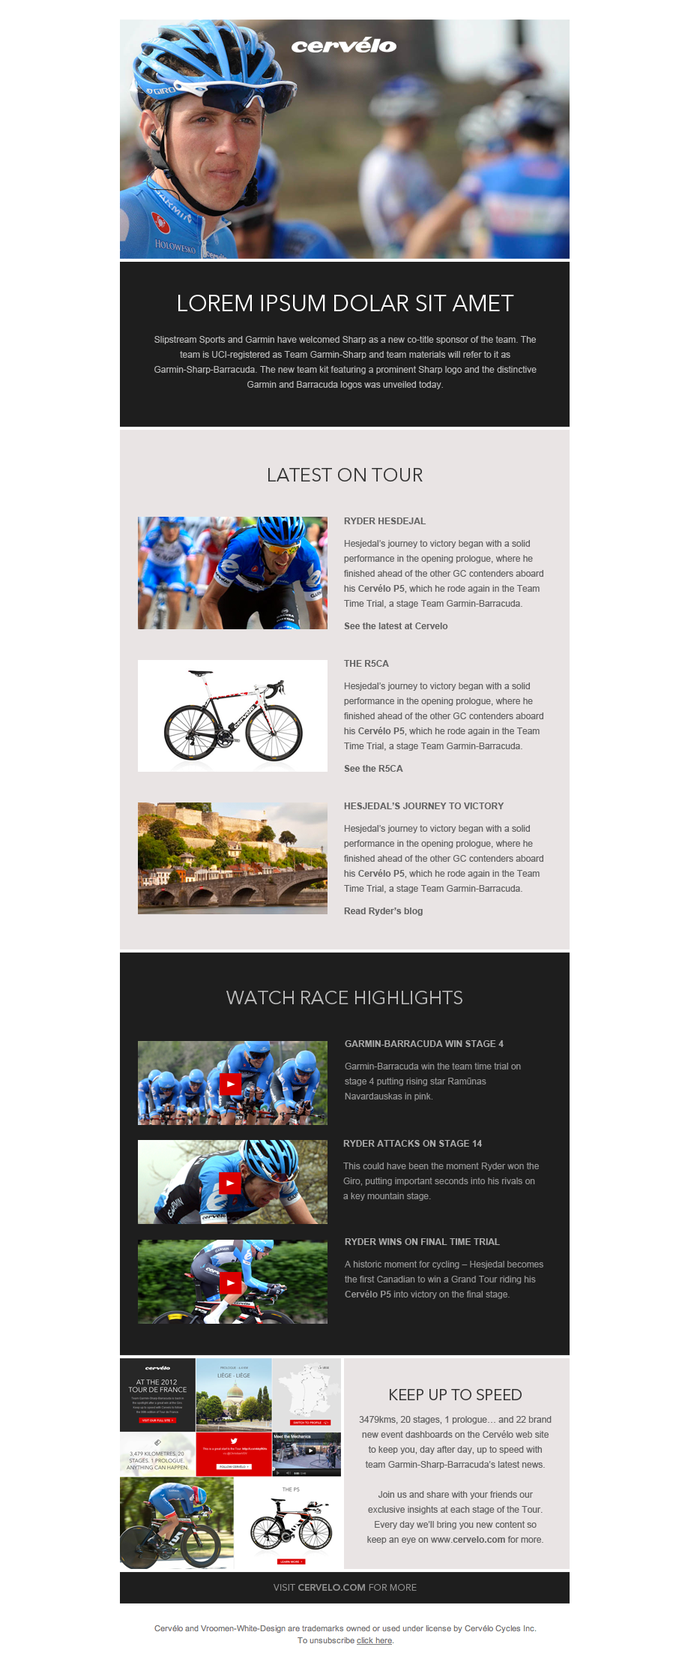
<style>
.page{position:relative;width:688px;height:1668px;background:#ffffff}
.page>*{position:absolute;margin:0}
.t1{font:22.5px "AvenirNextLTPro-Regular";color:#ffffff}
.t2{font:9px/15px "ArialMT";color:#b8b8b8}
.t3{font:18.7px "AvenirNextLTPro-Regular";color:#343434;text-transform:uppercase}
.t4{font:9px/15px "ArialMT";color:#626262}
.t5{font:9px/22.5px "Arial-BoldMT";color:#626262;text-transform:uppercase}
.t6{font:9px/22.5px "ArialMT";color:#626262}
.t7{font:9px/15px "Arial-BoldMT";color:#626262}
.t8{font:9px/22.5px "Arial-BoldMT";color:#626262}
.t9{font:9px/15px "Arial-BoldMT";color:#626262;text-transform:uppercase}
.t10{font:18.7px "AvenirNextLTPro-Regular";color:#bebebe;text-transform:uppercase}
.t11{font:9px/15px "ArialMT";color:#939393}
.t12{font:9px/19.5px "Arial-BoldMT";color:#ababab;text-transform:uppercase}
.t13{font:9px/22.5px "ArialMT";color:#939393}
.t14{font:9px/15px "Arial-BoldMT";color:#939393}
.t15{font:15px/19.5px "AvenirNextLTPro-Regular";color:#343434;text-transform:uppercase}
.t16{font:9px/16.5px "ArialMT";color:#626262}
.t17{font:9px "AvenirNextLTPro-Demi";letter-spacing:0.025em;color:#8d8d8d;text-transform:uppercase}
.t18{font:9px "AvenirNextLTPro-Regular";letter-spacing:0.025em;color:#8d8d8d;text-transform:uppercase}
</style>
<div class="page">
<p class="t1" style="left:178px;top:295px;width:336px;height:16px">LOREM IPSUM DOLAR SIT AMET</p>
<p class="t2" style="left:154px;top:336px;width:383px;height:53px;text-align:center">Slipstream Sports and Garmin have welcomed Sharp as a new co-title sponsor of the team. The team is UCI-registered as Team Garmin-Sharp and team materials will refer to it as Garmin-Sharp-Barracuda. The new team kit featuring a prominent Sharp logo and the distinctive Garmin and Barracuda logos was unveiled today.</p>
<p class="t3" style="left:268px;top:468px;width:155px;height:13px">LATEST ON TOUR</p>
<p class="t4" style="left:344px;top:517px;width:200px;height:112px"><span class="t5">ryder hesdejal<br></span><span class="t6">Hesjedal’s</span> journey to victory began with a solid performance in the opening prologue, where he finished ahead of the other GC contenders aboard his <span class="t7">Cervélo P5</span>, which he rode again in the Team Time Trial, a stage Team Garmin-Barracuda.<br><span class="t8">See</span><span class="t7"> the latest at Cervelo</span></p>
<p class="t4" style="left:344px;top:660px;width:200px;height:112px"><span class="t5">the r5ca<br></span><span class="t6">Hesjedal’s</span> journey to victory began with a solid performance in the opening prologue, where he finished ahead of the other GC contenders aboard his <span class="t7">Cervélo P5</span>, which he rode again in the Team Time Trial, a stage Team Garmin-Barracuda.<br><span class="t8">See</span><span class="t7"> the R5CA</span></p>
<p class="t4" style="left:344px;top:802px;width:200px;height:114px"><span class="t5">Hesjedal’s</span><span class="t9"> journey to victory<br></span><span class="t6">Hesjedal’s</span> journey to victory began with a solid performance in the opening prologue, where he finished ahead of the other GC contenders aboard his <span class="t7">Cervélo P5</span>, which he rode again in the Team Time Trial, a stage Team Garmin-Barracuda.<br><span class="t8">Read Ryder’s blog</span></p>
<p class="t10" style="left:226px;top:991px;width:237px;height:13px">watch RACE HIGHLIGHTS</p>
<p class="t11" style="left:345px;top:1040px;width:176px;height:61px"><span class="t12">Garmin-Barracuda win stage 4 <br></span><span class="t13">Garmin-Barracuda win the tea</span>m time trial on <br>stage 4 putting rising star Ramūnas <br>Navardauskas in pink.</p>
<p class="t11" style="left:343px;top:1140px;width:196px;height:61px"><span class="t12">ryder attacks on stage 14<br></span><span class="t13">This could have b</span>een the moment Ryder won the Giro, putting important seconds into his rivals on <br>a key mountain stage.</p>
<p class="t11" style="left:345px;top:1238px;width:199px;height:61px"><span class="t12">Ryder wins on final time trial<br></span><span class="t13">A </span>historic moment for cycling – Hesjedal becomes the first Canadian to win a Grand Tour riding his <span class="t14">Cervélo P5</span> into victory on the final stage.</p>
<p class="t4" style="left:359px;top:1389px;width:193px;height:155px;text-align:center"><span class="t15">KEEP UP TO SPEED<br></span><span class="t6">3479kms, 20 </span><span class="t16">stages, 1 </span>prologue… and 22 brand new event dashboards on the Cervélo web site to keep you, day after day, up to speed with team Garmin-Sharp-Barracuda’s latest news. <br><br>Join us and share with your friends our exclusive insights at each stage of the Tour. Every day we’ll bring you new content so<br>keep an eye on www.<span class="t7">cervelo.com</span> for more.</p>
<p class="t17" style="left:274px;top:1584px;width:143px;height:7px"><span class="t18">visit </span>cervelo.com<span class="t18"> for more</span></p>
</div>
